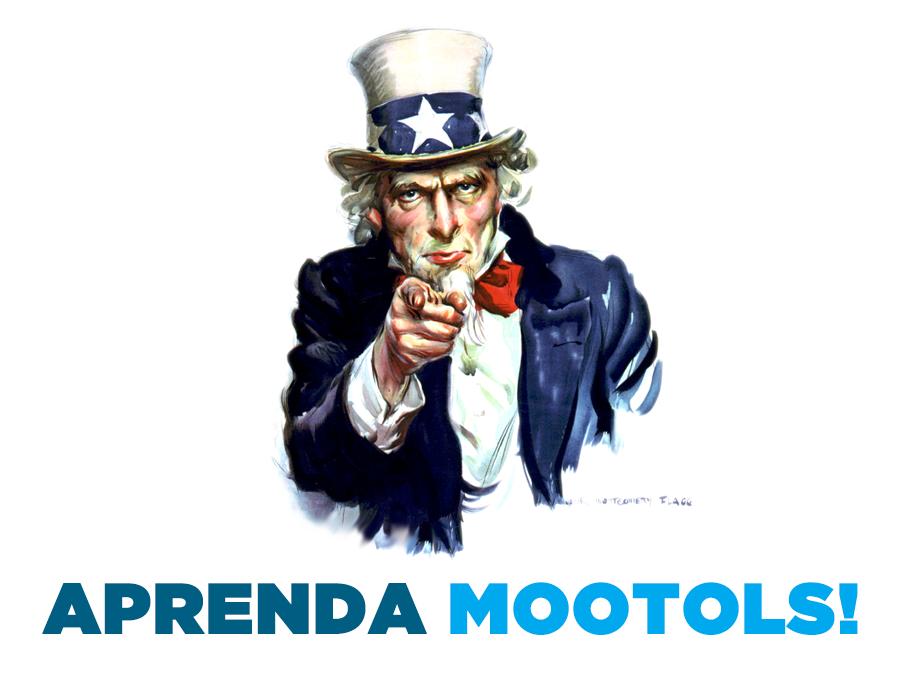
<style>
.page{position:relative;width:900px;height:700px;background:#ffffff}
.page>*{position:absolute;margin:0}
.t1{font:71.4px "GothamUltra";color:#00a9ee;font-weight:bold}
.t2{font:71.4px "GothamUltra";color:#005e83;font-weight:bold}
</style>
<div class="page">
<p class="t1" style="left:42px;top:582px;width:816px;height:53px"><span class="t2">APRENDA </span>MOOTOLS!</p>
</div>
